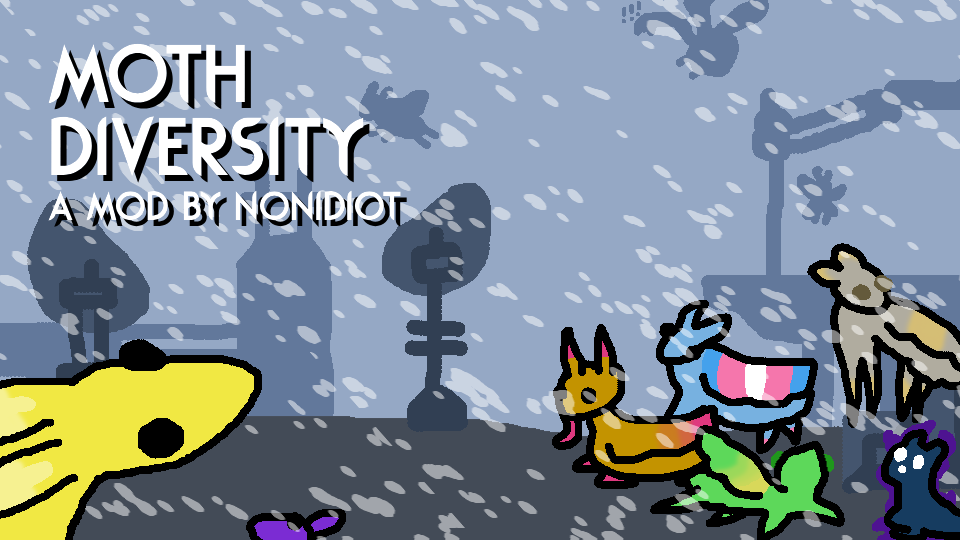
<style>
.page{position:relative;width:960px;height:540px;background:#95a8c5}
.page>*{position:absolute;margin:0}
.t1{font:96px/73px "Rodondo";color:#ffffff}
.t2{font:48px "Rodondo";color:#ffffff}
</style>
<div class="page">
<p class="t1" style="left:48px;top:43px;width:316px;height:134px">MOTH<br>DIVERSITY</p>
<p class="t2" style="left:48px;top:190px;width:353px;height:31px">a mod by NonIdiot</p>
</div>
